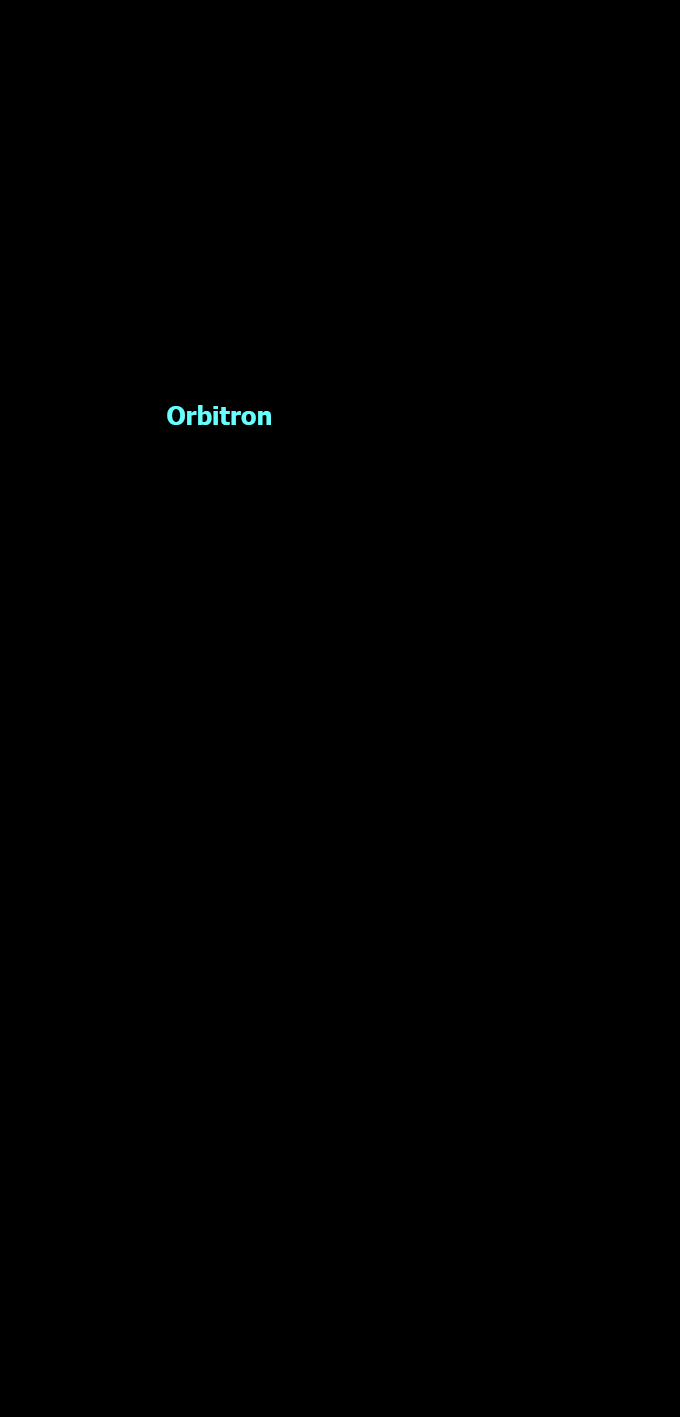
<style>
.page{position:relative;width:680px;height:1417px;background:#000000}
.page>*{position:absolute;margin:0}
.t1{font:25px "Tahoma-Bold";color:#66ffff}
</style>
<div class="page">
<p class="t1" style="left:167px;top:405px;width:104px;height:20px">Orbitron</p>
</div>
